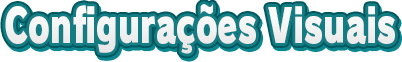
<style>
.page{position:relative;width:402px;height:62px;background:#ffffff}
.page>*{position:absolute;margin:0}
.t1{font:46.7px "RodinPro-UB";letter-spacing:0.005em;color:#f2f2f3;scale:0.69 1}
</style>
<div class="page">
<p class="t1" style="left:5px;top:4px;width:390px;height:50px">Configurações Visuais</p>
</div>
